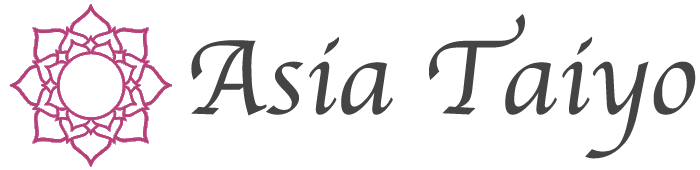
<style>
.page{position:relative;width:700px;height:170px;background:#ffffff}
.page>*{position:absolute;margin:0}
.t1{font:110px "Apple-Chancery";color:#444444}
</style>
<div class="page">
<p class="t1" style="left:191px;top:14px;width:505px;height:145px">Asia Taiyo</p>
</div>
